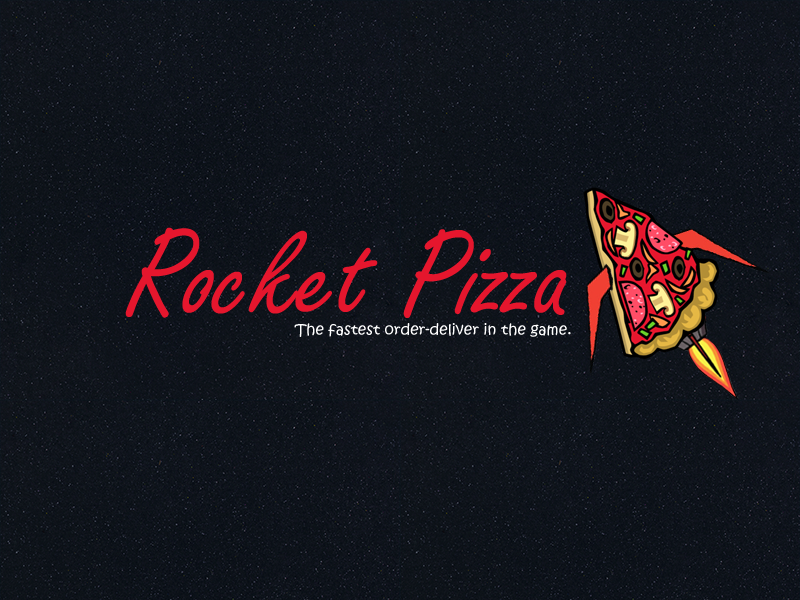
<style>
.page{position:relative;width:800px;height:600px}
.page>*{position:absolute;margin:0}
.t1{font:133px "FreestyleScript-Regular";color:#e5162d}
.t2{font:15px "KristenITC-Regular";color:#ffffff}
</style>
<div class="page">
<p class="t1" style="left:125px;top:227px;width:442px;height:91px">Rocket Pizza</p>
<p class="t2" style="left:294px;top:323px;width:277px;height:14px">The fastest order-deliver in the game.</p>
</div>
